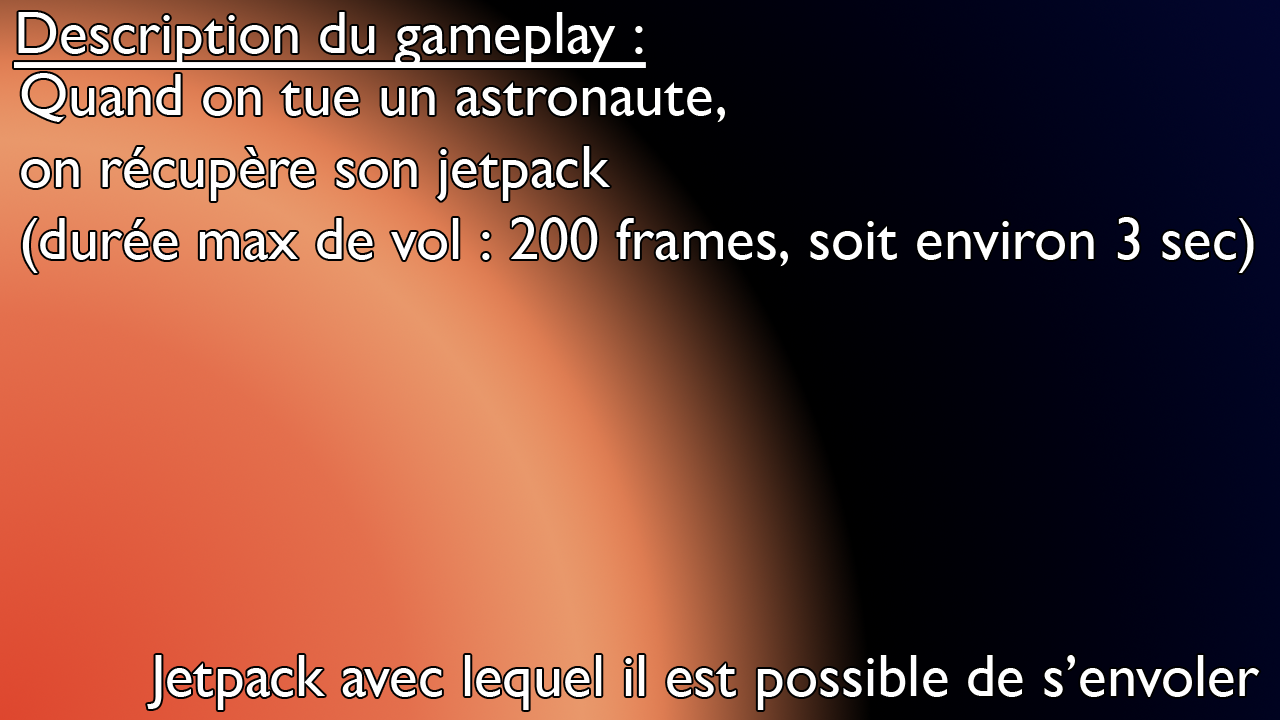
<style>
.page{position:relative;width:1280px;height:720px}
.page>*{position:absolute;margin:0}
.t1{font:60px "GillSansNova";color:#ffffff;text-decoration:underline}
.t2{font:60px "GillSansNova";color:#ffffff}
</style>
<div class="page">
<p class="t1" style="left:14px;top:12px;width:632px;height:56px">Description du gameplay :</p>
<p class="t2" style="left:21px;top:73px;width:1233px;height:200px">Quand on tue un astronaute, <br>on récupère son jetpack<br>(durée max de vol : 200 frames, soit environ 3 sec)</p>
<p class="t2" style="left:147px;top:655px;width:1113px;height:55px">Jetpack avec lequel il est possible de s’envoler</p>
</div>
